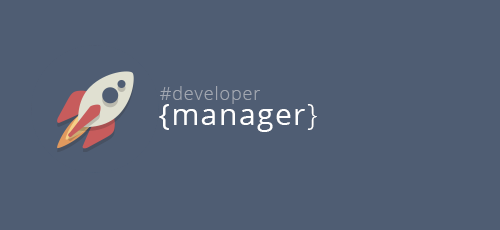
<style>
.page{position:relative;width:500px;height:230px;background:#4f5d73}
.page>*{position:absolute;margin:0}
.t1{font:18px "OpenSans-Light";letter-spacing:0.05em;color:#a2a7b1}
.t2{font:30px "OpenSans";letter-spacing:0.05em;color:#ffffff}
.t3{font:30px "OpenSans-Light";letter-spacing:0.05em;color:#ffffff}
</style>
<div class="page">
<p class="t1" style="left:160px;top:86px;width:100px;height:18px">#developer</p>
<p class="t2" style="left:159px;top:104px;width:158px;height:28px">{manager<span class="t3">}</span></p>
</div>
